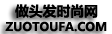
<style>
.page{position:relative;width:112px;height:34px;background:#ffffff}
.page>*{position:absolute;margin:0}
.t1{font:13.8px "MicrosoftYaHei-Bold";color:#000000}
.t2{font:11.9px "MicrosoftYaHei-Bold";color:#000000}
</style>
<div class="page">
<p class="t1" style="left:15px;top:4px;width:83px;height:14px">做头发时尚网</p>
<p class="t2" style="left:5px;top:21px;width:102px;height:11px">ZUOTOUFA.COM</p>
</div>
